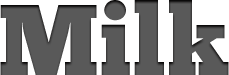
<style>
.page{position:relative;width:229px;height:75px;background:#595959}
.page>*{position:absolute;margin:0}
.t1{font:100px "ChunkFive";color:#595959}
</style>
<div class="page">
<p class="t1" style="left:0px;top:0px;width:229px;height:75px">Milk</p>
</div>
